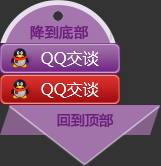
<style>
.page{position:relative;width:161px;height:166px;background:#333333}
.page>*{position:absolute;margin:0}
.t1{font:16px "MicrosoftYaHei";color:#ffffff}
.t2{font:14px "MicrosoftYaHei";color:#6d1e7c;font-weight:bold}
</style>
<div class="page">
<p class="t1" style="left:41px;top:51px;width:58px;height:16px">QQ交谈</p>
<p class="t1" style="left:41px;top:82px;width:58px;height:16px">QQ交谈</p>
<p class="t2" style="left:57px;top:113px;width:57px;height:15px">回到顶部</p>
</div>
